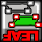
<style>
.page{position:relative;width:42px;height:42px}
.page>*{position:absolute;margin:0}
.t1{font:13.7px "Arial-Black";letter-spacing:-0.075em;color:#ff0000}
</style>
<div class="page">
<p class="t1" style="left:3px;top:30px;width:36px;height:11px;rotate:-180deg">LEAF</p>
</div>
